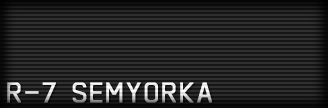
<style>
.page{position:relative;width:328px;height:108px;background:#161616}
.page>*{position:absolute;margin:0}
.t1{font:28px "ACES07_Regular";letter-spacing:0.025em;font-weight:bold}
</style>
<div class="page">
<p class="t1" style="left:7px;top:82px;width:205px;height:21px">R-7 SEMYORKA</p>
</div>
